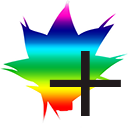
<style>
.page{position:relative;width:128px;height:128px;background:#ffffff}
.page>*{position:absolute;margin:0}
.t1{font:122.4px "MyriadPro-Regular";color:#201a1c;scale:1.13 1}
</style>
<div class="page">
<p class="t1" style="left:49px;top:51px;width:72px;height:65px">+</p>
</div>
